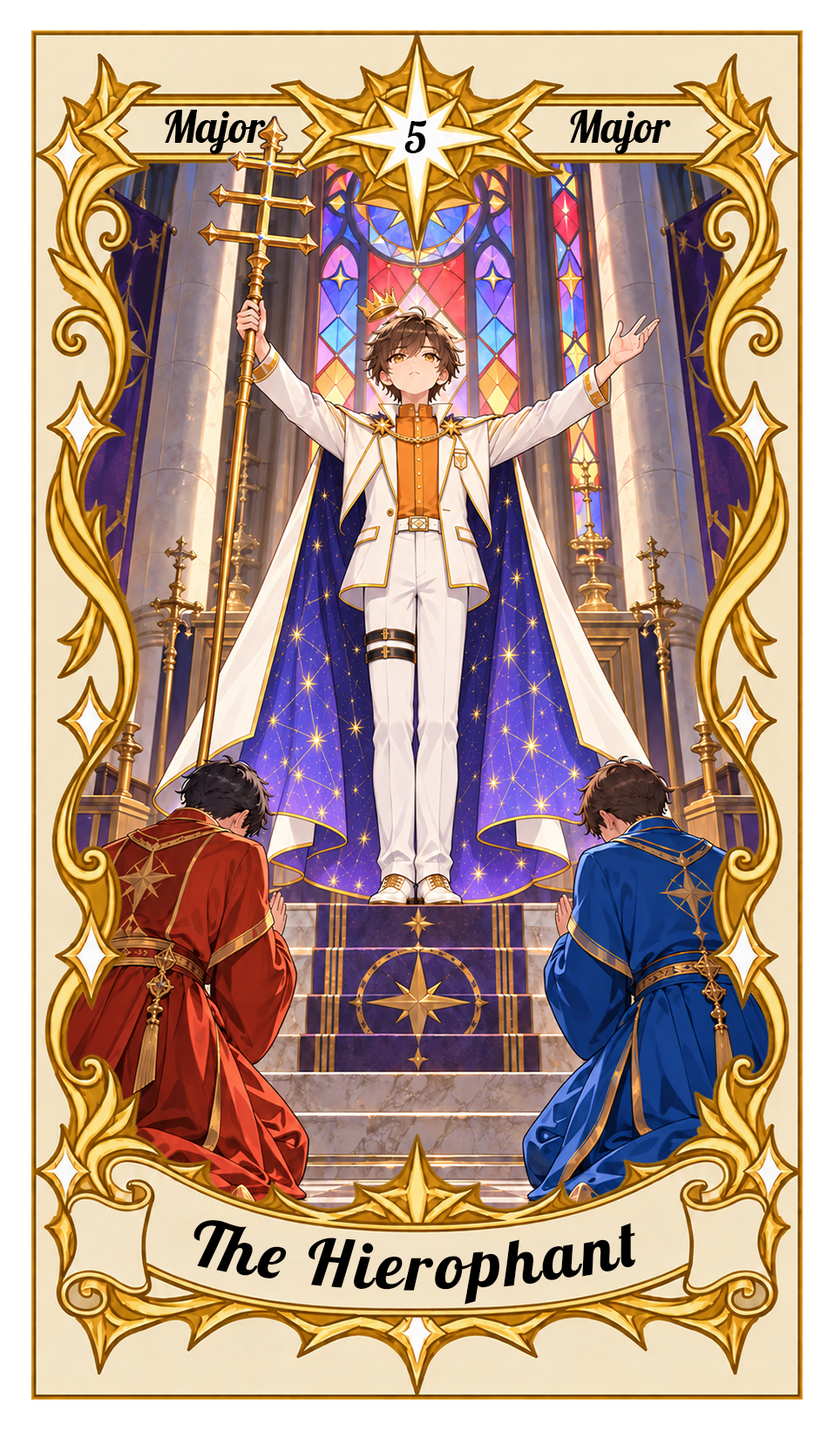
<style>
.page{position:relative;width:834px;height:1430px}
.page>*{position:absolute;margin:0}
.t1{font:43.6px "Lobster-Regular";color:#000000}
.t2{font:65.3px "Lobster-Regular";letter-spacing:0.05em;color:#000000}
</style>
<div class="page">
<p class="t1" style="left:165px;top:110px;width:101px;height:44px">Major</p>
<p class="t1" style="left:570px;top:110px;width:101px;height:44px">Major</p>
<p class="t1" style="left:404px;top:120px;width:23px;height:33px">5</p>
<p class="t2" style="left:193px;top:1220px;width:443px;height:85px">The Hierophant</p>
</div>
